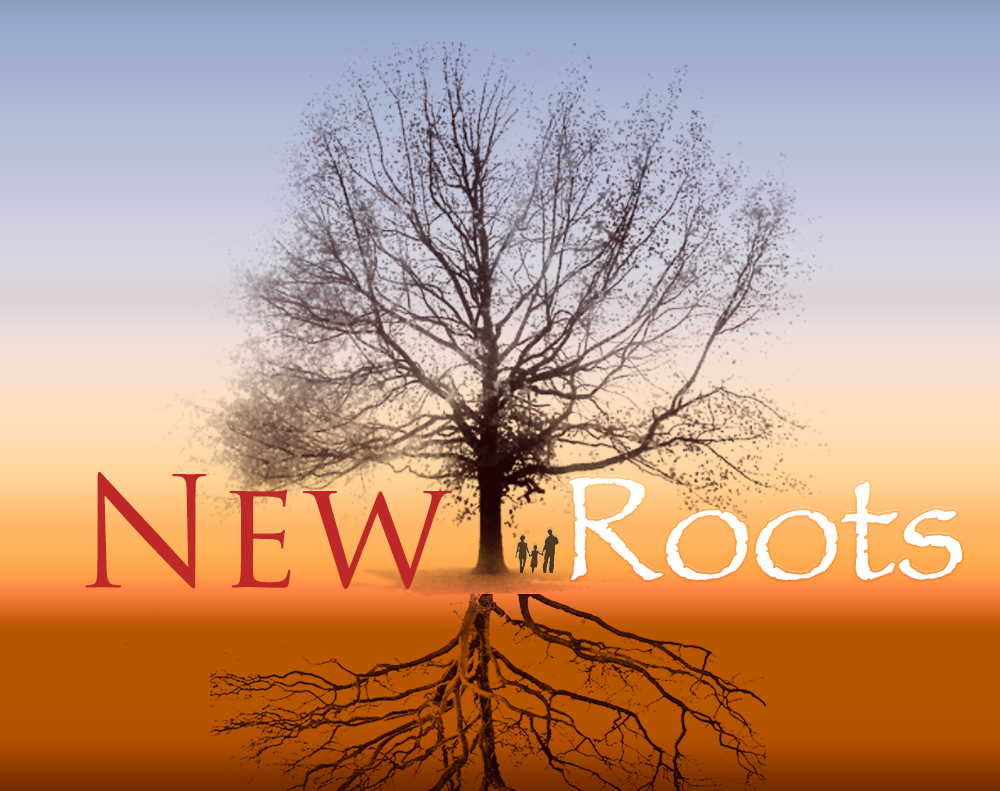
<style>
.page{position:relative;width:1000px;height:791px}
.page>*{position:absolute;margin:0}
.t1{font:150px "TrajanPro-Regular";color:#bf2828}
.t2{font:150px "Papyrus";color:#fffffe}
</style>
<div class="page">
<p class="t1" style="left:85px;top:471px;width:367px;height:118px">New</p>
<p class="t2" style="left:569px;top:477px;width:393px;height:104px">Roots</p>
</div>
